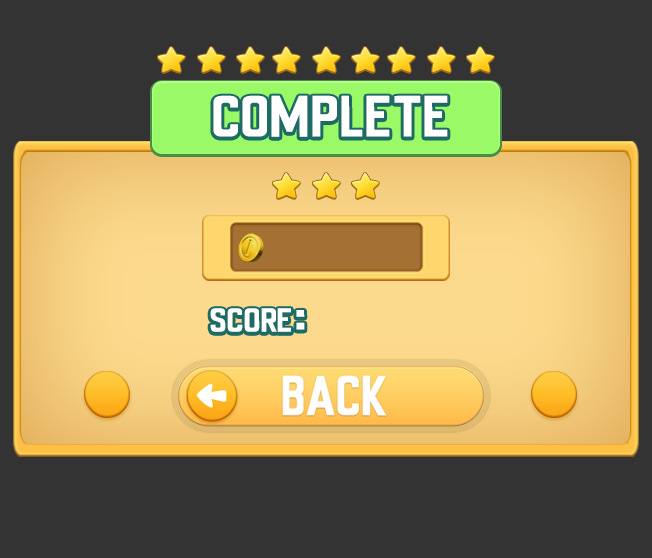
<style>
.page{position:relative;width:652px;height:558px;background:#333333}
.page>*{position:absolute;margin:0}
.t1{font:52.4px "UniversalKnowledge";letter-spacing:-0.02em;color:#ffffff;scale:1.14 1}
.t2{font:30.4px "UniversalKnowledge";letter-spacing:-0.02em;color:#ffffff;scale:1.14 1}
</style>
<div class="page">
<p class="t1" style="left:213px;top:95px;width:235px;height:42px">COMPLETE</p>
<p class="t2" style="left:210px;top:308px;width:81px;height:24px">SCORE</p>
<p class="t1" style="left:296px;top:310px;width:9px;height:20px">:</p>
</div>
